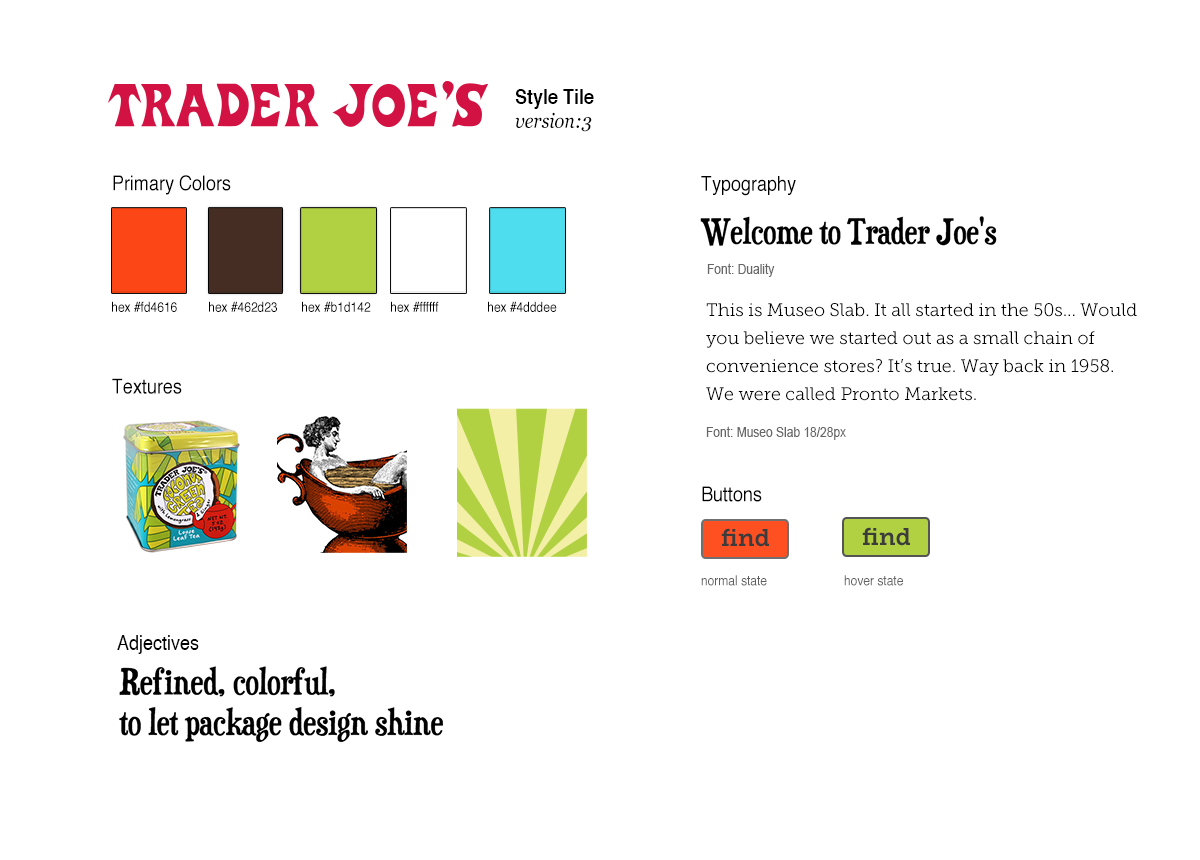
<style>
.page{position:relative;width:1200px;height:860px;background:#ffffff}
.page>*{position:absolute;margin:0}
.t1{font:20.4px "Helvetica-Bold";color:#000000;scale:0.88 1}
.t2{font:20.4px "Georgia-Italic";color:#000000;scale:0.88 1}
.t3{font:20.4px "Helvetica";color:#000000;scale:0.88 1}
.t4{font:13.6px "ArialMT";color:#666666;scale:0.88 1}
.t5{font:13.6px "Helvetica";color:#000000;scale:0.88 1}
.t6{font:18px/28px "MuseoSlab-300";color:#000000}
.t7{font:24px "MuseoSlab-700";color:#3c3c3c}
.t8{font:13.6px "Helvetica";color:#5f5e5e;scale:0.88 1}
</style>
<div class="page">
<p class="t1" style="left:515px;top:89px;width:79px;height:20px">Style Tile</p>
<p class="t2" style="left:515px;top:112px;width:77px;height:20px">version:3</p>
<p class="t3" style="left:113px;top:175px;width:118px;height:20px">Primary Colors</p>
<p class="t3" style="left:701px;top:176px;width:95px;height:20px">Typography</p>
<p class="t4" style="left:707px;top:263px;width:68px;height:14px">Font: Duality</p>
<p class="t5" style="left:112px;top:301px;width:65px;height:11px">hex #fd4616</p>
<p class="t5" style="left:209px;top:301px;width:68px;height:11px">hex #462d23</p>
<p class="t5" style="left:302px;top:301px;width:69px;height:11px">hex #b1d142</p>
<p class="t5" style="left:391px;top:301px;width:48px;height:11px">hex #ffffff</p>
<p class="t5" style="left:488px;top:301px;width:69px;height:11px">hex #4dddee</p>
<p class="t6" style="left:706px;top:303px;width:431px;height:98px">This is Museo Slab. It all started in the 50s... Would you believe we started out as a small chain of convenience stores? It’s true. Way back in 1958. We were called Pronto Markets.</p>
<p class="t3" style="left:112px;top:378px;width:70px;height:16px">Textures</p>
<p class="t4" style="left:706px;top:426px;width:140px;height:14px">Font: Museo Slab 18/28px</p>
<p class="t3" style="left:702px;top:486px;width:60px;height:16px">Buttons</p>
<p class="t7" style="left:721px;top:528px;width:48px;height:19px">find</p>
<p class="t7" style="left:862px;top:527px;width:48px;height:19px">find</p>
<p class="t8" style="left:701px;top:575px;width:66px;height:11px">normal state</p>
<p class="t8" style="left:844px;top:575px;width:59px;height:11px">hover state</p>
<p class="t3" style="left:117px;top:635px;width:82px;height:19px">Adjectives</p>
</div>
